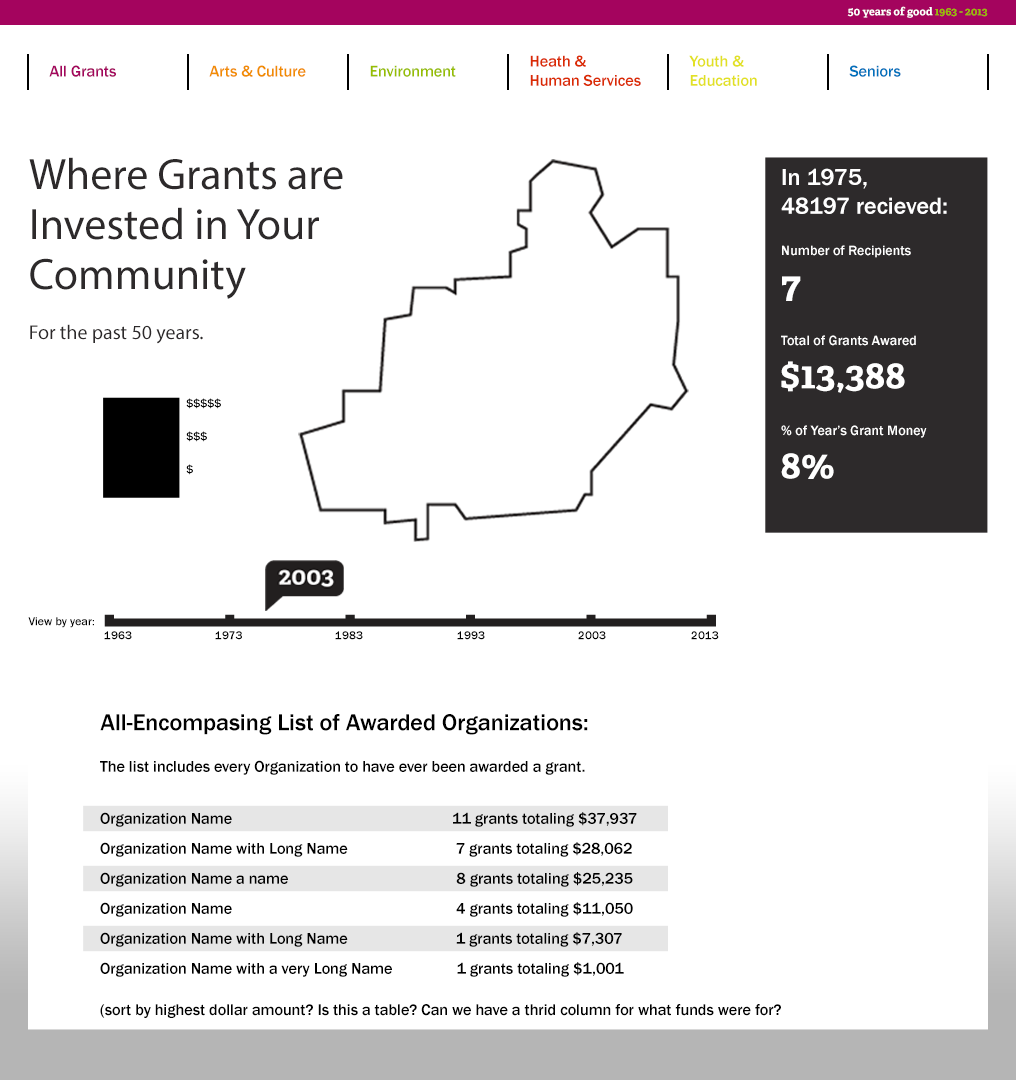
<style>
.page{position:relative;width:1016px;height:1081px;background:#ffffff}
.page>*{position:absolute;margin:0}
.t1{font:11px "AdelleBasic-Bold";color:#ffffff}
.t2{font:11px "AdelleBasic-Bold";color:#97be01}
.t3{font:16px "FranklinGothic-Medium";color:#a4045e}
.t4{font:16px "FranklinGothic-Medium";color:#f18d01}
.t5{font:16px "FranklinGothic-Medium";color:#97be01}
.t6{font:16px "FranklinGothic-Medium";color:#db2b02}
.t7{font:16px "FranklinGothic-Medium";color:#e2e124}
.t8{font:16px "FranklinGothic-Medium";color:#0072bc}
.t9{font:44px/50px "MyriadPro-Regular";color:#2d2a2b}
.t10{font:20px/50px "MyriadPro-Regular";color:#2d2a2b}
.t11{font:24px "FranklinGothic-Medium";color:#ffffff}
.t12{font:14px "FranklinGothic-Medium";color:#ffffff}
.t13{font:38px "AdelleBasic-Bold";color:#ffffff}
.t14{font:12px "FranklinGothic-Medium";color:#000000}
.t15{font:24px "FranklinGothic-Medium";color:#000000}
.t16{font:16px/30px "FranklinGothic-Medium";color:#000000}
.t17{font:16px "FranklinGothic-Medium";color:#000000}
</style>
<div class="page">
<p class="t1" style="left:847px;top:6px;width:141px;height:12px">50 years of good <span class="t2">1963 - 2013</span></p>
<p class="t3" style="left:49px;top:65px;width:67px;height:12px">All Grants</p>
<p class="t4" style="left:209px;top:65px;width:97px;height:12px">Arts &amp; Culture</p>
<p class="t5" style="left:370px;top:65px;width:86px;height:12px">Environment</p>
<p class="t6" style="left:530px;top:55px;width:111px;height:31px">Heath &amp;<br>Human Services</p>
<p class="t7" style="left:689px;top:55px;width:68px;height:31px">Youth &amp; <br>Education</p>
<p class="t8" style="left:849px;top:65px;width:52px;height:12px">Seniors</p>
<p class="t9" style="left:29px;top:157px;width:314px;height:187px">Where Grants are<br>Invested in Your<br>Community<br><span class="t10">For the past 50 years.</span></p>
<p class="t11" style="left:781px;top:168px;width:166px;height:46px">In 1975,<br>48197 recieved:</p>
<p class="t12" style="left:782px;top:245px;width:129px;height:13px">Number of Recipients</p>
<p class="t13" style="left:782px;top:276px;width:19px;height:25px">7</p>
<p class="t12" style="left:781px;top:335px;width:135px;height:11px">Total of Grants Awared</p>
<p class="t13" style="left:781px;top:361px;width:124px;height:32px">$13,388</p>
<p class="t14" style="left:186px;top:398px;width:35px;height:11px">$$$$$</p>
<p class="t12" style="left:781px;top:425px;width:146px;height:13px">% of Year’s Grant Money</p>
<p class="t14" style="left:186px;top:431px;width:21px;height:11px">$$$</p>
<p class="t13" style="left:781px;top:453px;width:53px;height:26px">8%</p>
<p class="t14" style="left:186px;top:464px;width:7px;height:11px">$</p>
<p class="t14" style="left:28px;top:617px;width:66px;height:11px">View by year:</p>
<p class="t14" style="left:104px;top:631px;width:28px;height:9px">1963</p>
<p class="t14" style="left:215px;top:631px;width:27px;height:9px">1973</p>
<p class="t14" style="left:335px;top:631px;width:28px;height:9px">1983</p>
<p class="t14" style="left:457px;top:631px;width:28px;height:9px">1993</p>
<p class="t14" style="left:578px;top:631px;width:28px;height:9px">2003</p>
<p class="t14" style="left:691px;top:631px;width:28px;height:9px">2013</p>
<p class="t15" style="left:100px;top:714px;width:488px;height:21px">All-Encompasing List of Awarded Organizations:</p>
<p class="t16" style="left:100px;top:760px;width:681px;height:258px"><span class="t17">The list includes every Organization to have ever been awarded a grant.<br></span>Organization Name                                                       11 grants totaling $37,937<br>Organization Name with Long Name                           7 grants totaling $28,062<br>Organization Name a name                                          8 grants totaling $25,235<br>Organization Name                                                        4 grants totaling $11,050<br>Organization Name with Long Name                           1 grants totaling $7,307<br>Organization Name with a very Long Name                1 grants totaling $1,001<br><span class="t17">(sort by highest dollar amount? Is this a table? Can we have a thrid column for what funds were for?</span></p>
</div>
